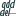
<style>
.page{position:relative;width:16px;height:16px;background:#ffffff}
.page>*{position:absolute;margin:0}
.t1{font:11.2px "MyriadPro-CondIt";color:#2d444b}
</style>
<div class="page">
<p class="t1" style="left:1px;top:0px;width:15px;height:8px">add</p>
<p class="t1" style="left:0px;top:8px;width:17px;height:8px">del</p>
</div>
